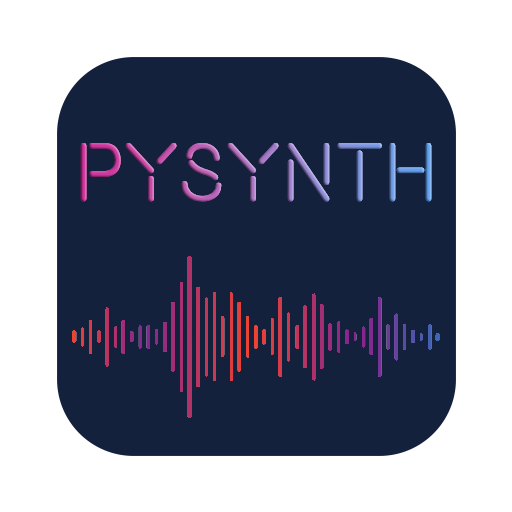
<style>
.page{position:relative;width:512px;height:512px;background:#14213d}
.page>*{position:absolute;margin:0}
.t1{font:82.7px "Beon-Medium"}
</style>
<div class="page">
<p class="t1" style="left:80px;top:143px;width:352px;height:59px">PySynth</p>
</div>
